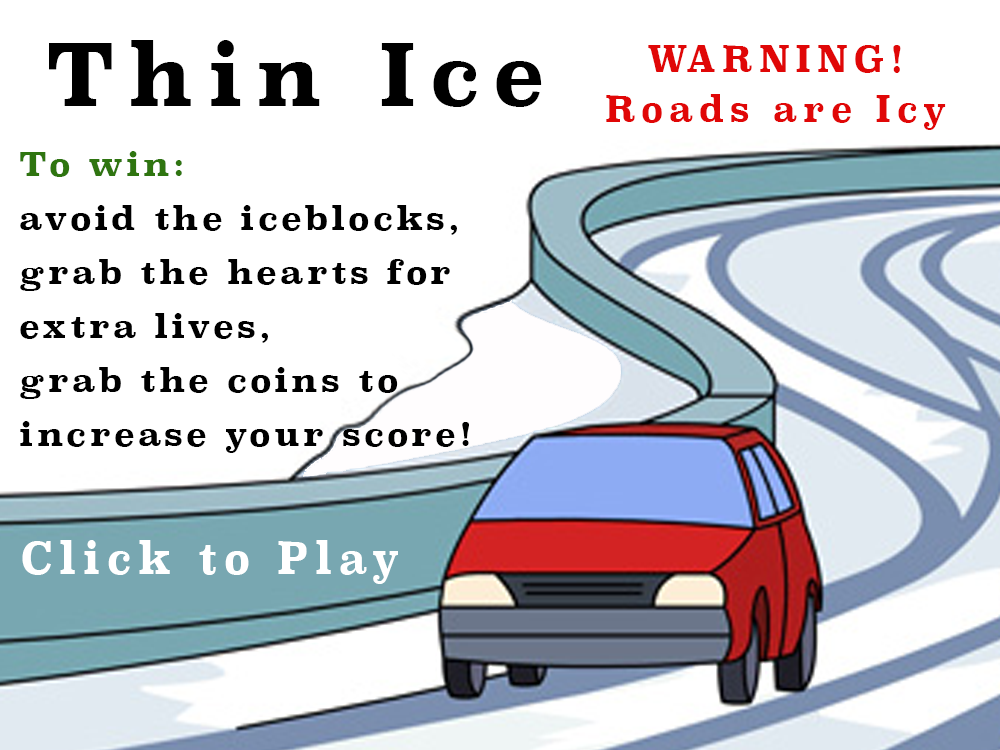
<style>
.page{position:relative;width:1000px;height:750px;background:#ffffff}
.page>*{position:absolute;margin:0}
.t1{font:85px "Superclarendon-Bold";letter-spacing:0.16em;color:#000000;scale:0.97 1}
.t2{font:35.6px/50.6px "Superclarendon-Bold";letter-spacing:0.16em;color:#e00707;scale:0.97 1}
.t3{font:31.7px/54px "Superclarendon-Bold";letter-spacing:0.1em;color:#000000;scale:1.03 1}
.t4{font:31.7px/54px "Superclarendon-Bold";letter-spacing:0.1em;color:#2f7510;scale:1.03 1}
.t5{font:44.2px "Superclarendon-Bold";letter-spacing:0.16em;color:#ffffff;scale:0.92 1}
</style>
<div class="page">
<p class="t1" style="left:49px;top:40px;width:493px;height:67px">Thin Ice</p>
<p class="t2" style="left:606px;top:45px;width:340px;height:85px;text-align:center">WARNING!<br>Roads are Icy</p>
<p class="t3" style="left:20px;top:151px;width:449px;height:302px"><span class="t4">To win:<br></span>avoid the iceblocks,<br>grab the hearts for <br>extra lives, <br>grab the coins to <br>increase your score!</p>
<p class="t5" style="left:22px;top:540px;width:376px;height:44px">Click to Play</p>
</div>
